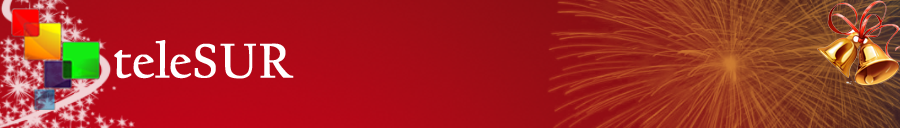
<style>
.page{position:relative;width:900px;height:128px}
.page>*{position:absolute;margin:0}
.t1{font:50px "CalifornianFB-Reg";color:#ffffff;font-weight:bold}
</style>
<div class="page">
<p class="t1" style="left:114px;top:40px;width:180px;height:39px">teleSUR</p>
</div>
